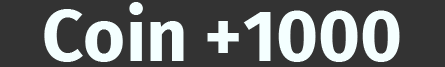
<style>
.page{position:relative;width:445px;height:67px;background:#333333}
.page>*{position:absolute;margin:0}
.t1{font:72px "FiraSans-Bold";color:#f4ffff}
</style>
<div class="page">
<p class="t1" style="left:44px;top:2px;width:356px;height:60px">Coin +1000</p>
</div>
